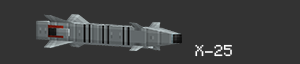
<style>
.page{position:relative;width:300px;height:64px;background:#333333}
.page>*{position:absolute;margin:0}
.t1{font:12.6px "Minecraft";color:#ffffff}
</style>
<div class="page">
<p class="t1" style="left:195px;top:44px;width:37px;height:13px">X-25</p>
</div>
